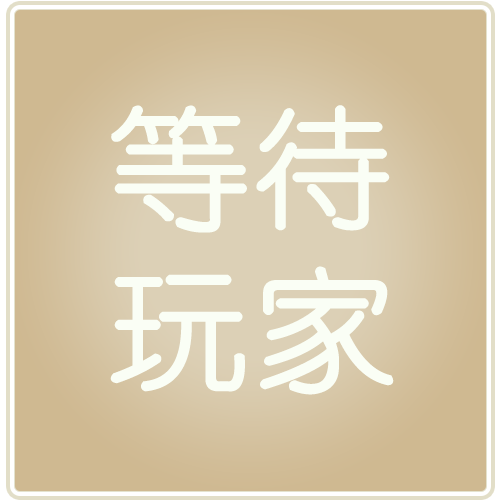
<style>
.page{position:relative;width:500px;height:500px}
.page>*{position:absolute;margin:0}
.t1{font:131px "YouYuan";color:#fafef5;font-weight:bold;scale:1.08 1}
</style>
<div class="page">
<p class="t1" style="left:111px;top:105px;width:279px;height:128px">等待</p>
<p class="t1" style="left:110px;top:266px;width:284px;height:129px">玩家</p>
</div>
